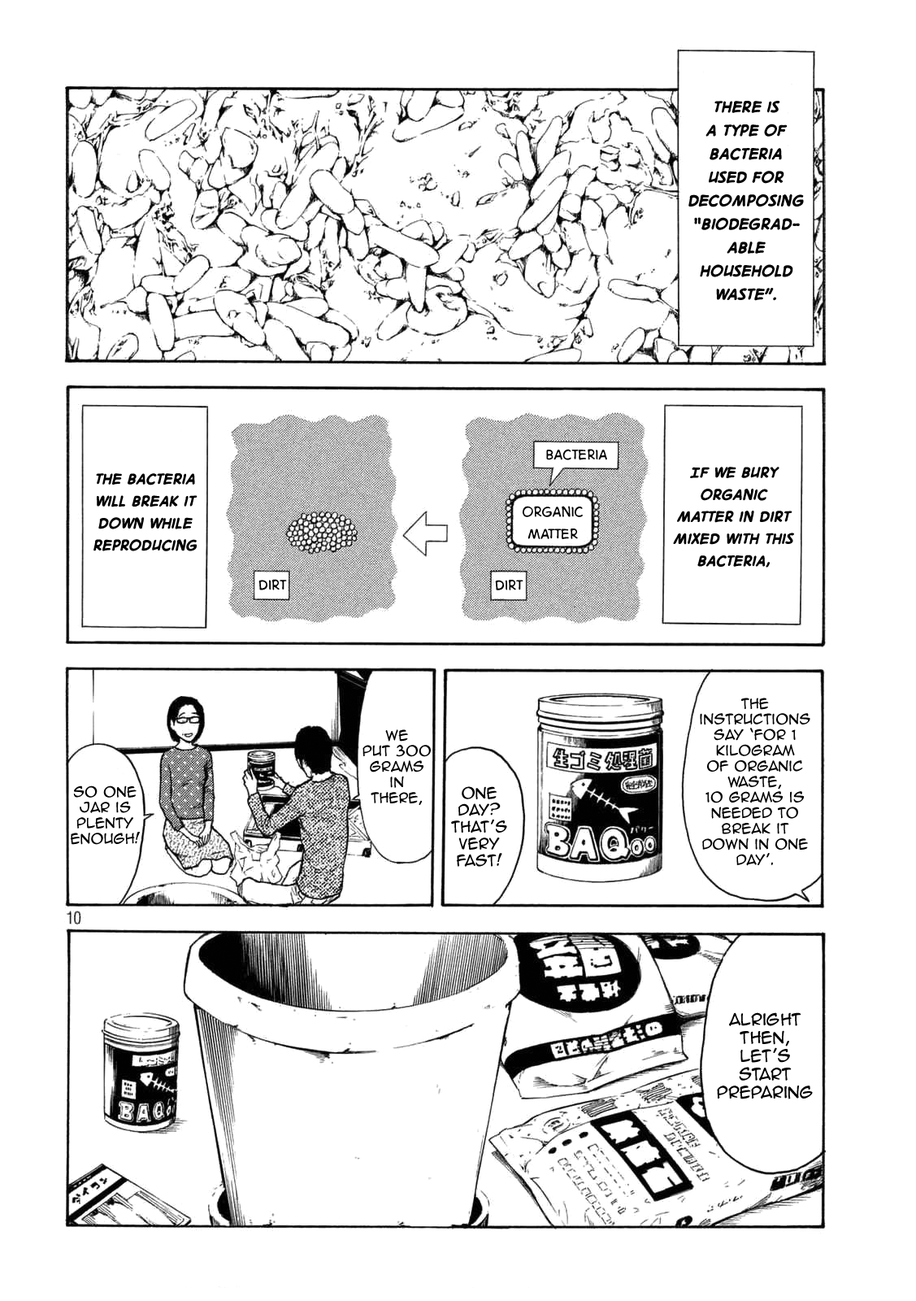
<style>
.page{position:relative;width:916px;height:1301px;background:#ffffff}
.page>*{position:absolute;margin:0}
.t1{font:19.5px "DigitalStrip.BB-Bold";color:#000000}
.t2{font:18.4px "DigitalStrip.BB";color:#000000}
.t3{font:18.4px "DigitalStrip.BB-Bold";color:#000000}
.t4{font:13px "AnimeAce2.0BB";color:#000000}
.t5{font:14.1px "AnimeAce2.0BB";color:#000000}
.t6{font:15.2px "AnimeAce2.0BB";color:#000000}
</style>
<div class="page">
<p class="t1" style="left:689px;top:101px;width:115px;height:200px;text-align:center">There is <br>a type of bacteria <br>used for decomposing “biodegrad-<br>able household waste”.</p>
<p class="t2" style="left:546px;top:449px;width:61px;height:11px">Bacteria</p>
<p class="t3" style="left:94px;top:473px;width:104px;height:78px;text-align:center">The bacteria will break it down while reproducing</p>
<p class="t3" style="left:673px;top:467px;width:121px;height:101px;text-align:center">If we bury organic matter in dirt mixed with this bacteria,</p>
<p class="t2" style="left:523px;top:506px;width:60px;height:33px;text-align:center">organic matter</p>
<p class="t2" style="left:259px;top:579px;width:28px;height:11px">dirt</p>
<p class="t2" style="left:495px;top:580px;width:29px;height:10px">dirt</p>
<p class="t4" style="left:700px;top:698px;width:111px;height:168px;text-align:center">The instructions say ‘for 1 kilogram <br>of organic waste, <br>10 grams is needed to break it down in one day’.</p>
<p class="t4" style="left:363px;top:729px;width:68px;height:76px;text-align:center">We <br>put 300 grams <br>in there,</p>
<p class="t4" style="left:71px;top:786px;width:69px;height:59px;text-align:center">So One jar is plenty enough!</p>
<p class="t5" style="left:451px;top:786px;width:56px;height:81px;text-align:center">One day? That’s very fast!</p>
<p class="t6" style="left:717px;top:1012px;width:96px;height:87px;text-align:center">Alright then, <br>let’s start preparing</p>
</div>
